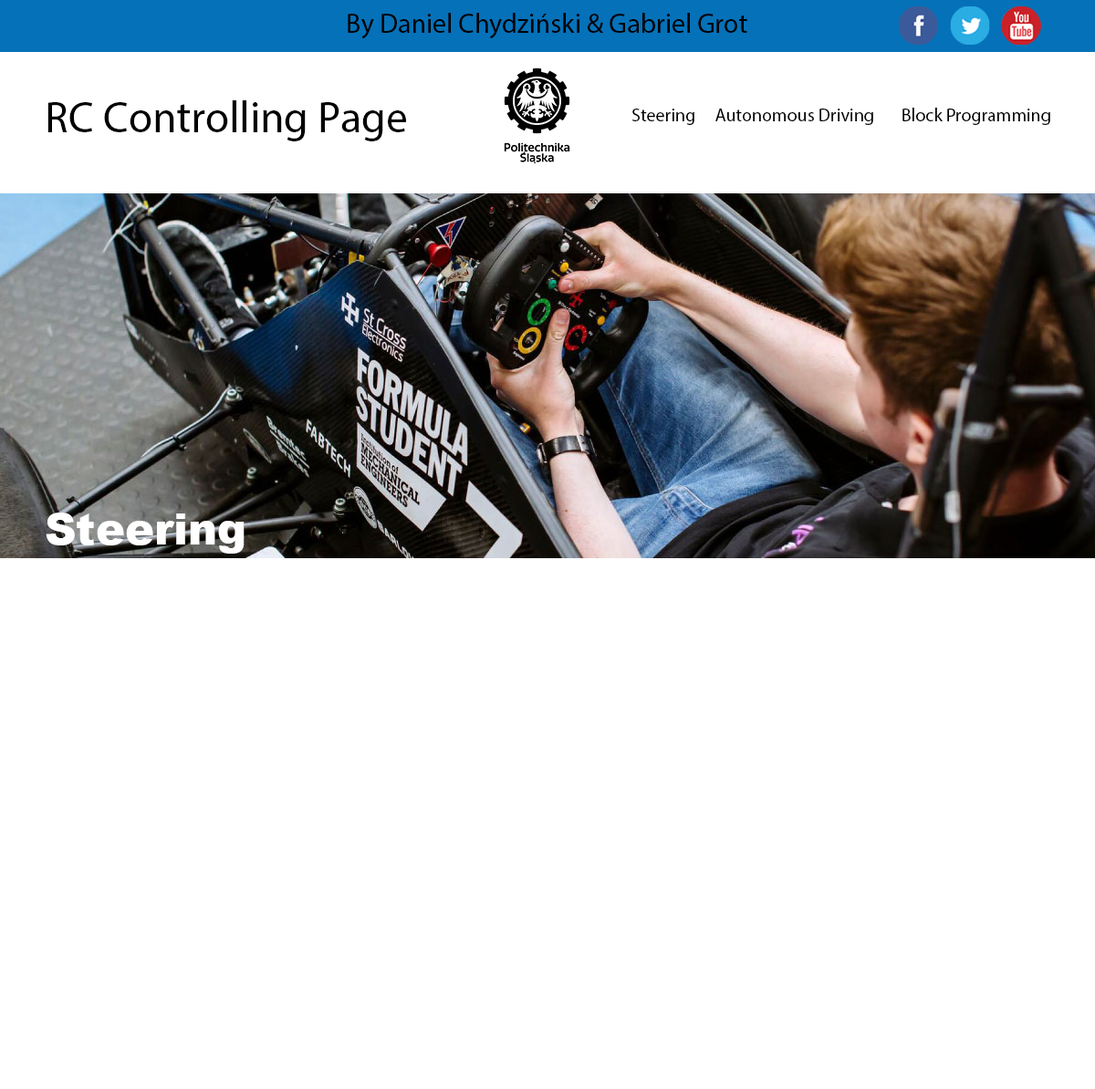
<style>
.page{position:relative;width:1095px;height:1089px;background:#ffffff}
.page>*{position:absolute;margin:0}
.t1{font:27.4px "MyriadPro-Regular";color:#000000}
.t2{font:43.8px "MyriadPro-Regular";color:#000000}
.t3{font:18.2px "MyriadPro-Regular";color:#000000}
.t4{font:43.8px "Arial-Black";color:#ffffff}
</style>
<div class="page">
<p class="t1" style="left:348px;top:13px;width:399px;height:26px">By Daniel Chydziński &amp; Gabriel Grot</p>
<p class="t2" style="left:47px;top:100px;width:359px;height:41px">RC Controlling Page</p>
<p class="t3" style="left:632px;top:108px;width:418px;height:17px">Steering     Autonomous Driving       Block Programming</p>
<p class="t4" style="left:46px;top:513px;width:198px;height:41px">Steering</p>
</div>
